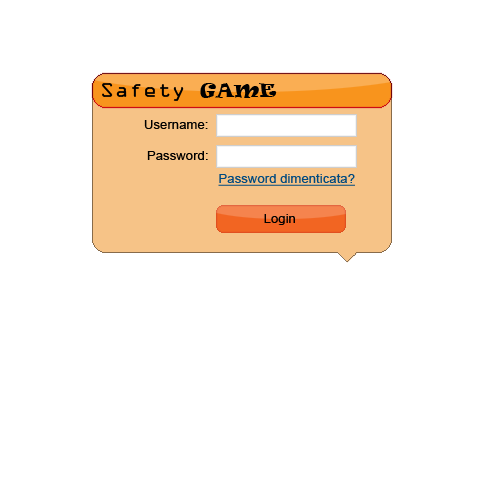
<style>
.page{position:relative;width:500px;height:500px;background:#ffffff}
.page>*{position:absolute;margin:0}
.t1{font:18px "OCRAStd";color:#000000;scale:1.1 1}
.t2{font:18px "Ravie";color:#000000;scale:1.1 1}
.t3{font:12px "ArialMT";color:#000000;scale:1.1 1}
.t4{font:12px "ArialMT";color:#004a80;text-decoration:underline;scale:1.1 1}
</style>
<div class="page">
<p class="t1" style="left:102px;top:83px;width:175px;height:18px">Safety <span class="t2">GAME</span></p>
<p class="t3" style="left:144px;top:120px;width:64px;height:9px">Username:</p>
<p class="t3" style="left:147px;top:151px;width:61px;height:9px">Password:</p>
<p class="t4" style="left:218px;top:174px;width:137px;height:12px">Password dimenticata?</p>
<p class="t3" style="left:264px;top:214px;width:31px;height:11px">Login</p>
</div>
